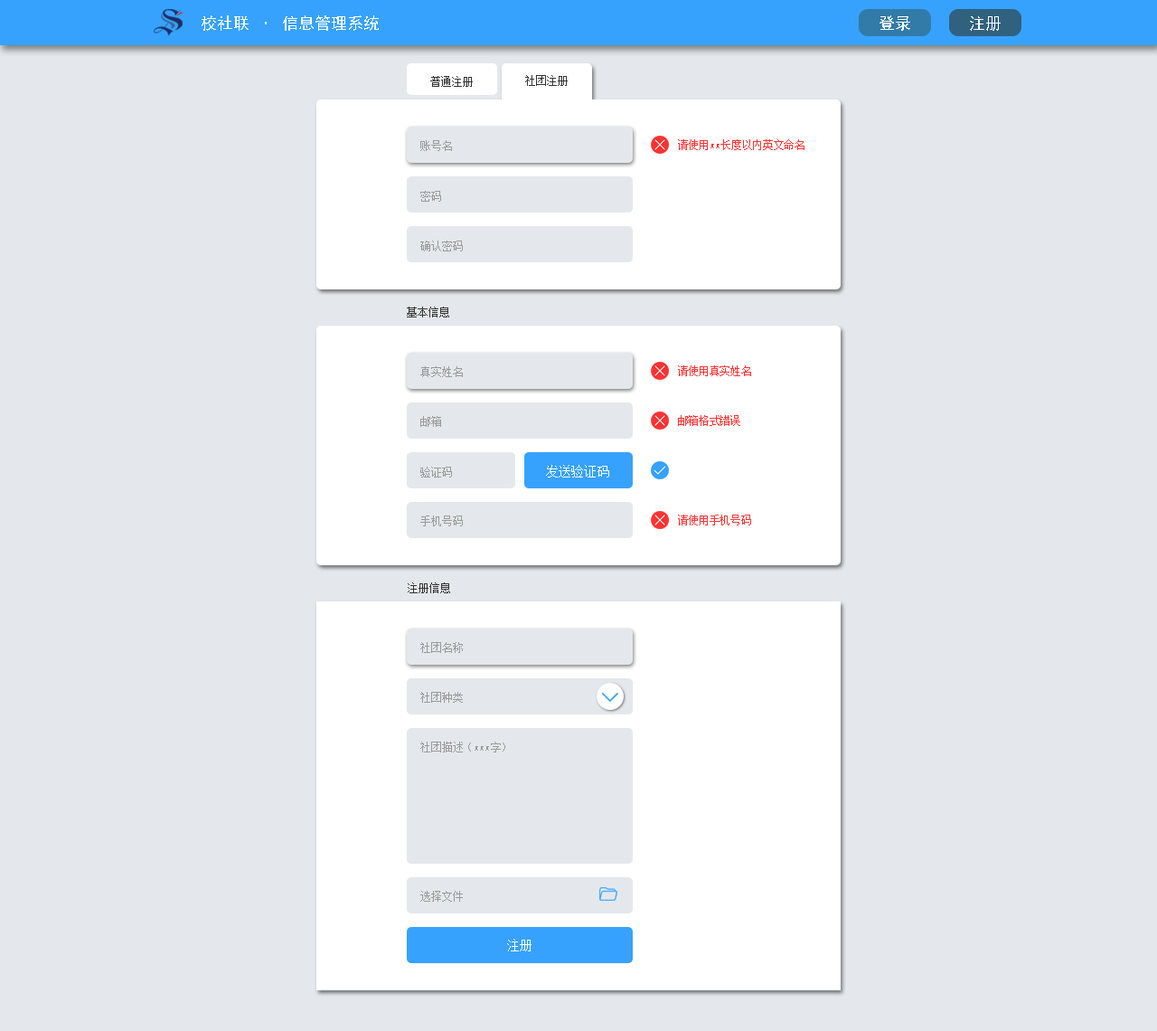
<style>
.page{position:relative;width:1157px;height:1031px;background:#e4e8ec}
.page>*{position:absolute;margin:0}
.t1{font:16.3px "SimHei";color:#ffffff}
.t2{font:10.8px "SimSun";color:#333333}
.t3{font:10.8px "SimSun";color:#999999}
.t4{font:10.8px "SimSun";color:#ff3333}
.t5{font:12.7px "SimSun";color:#ffffff}
</style>
<div class="page">
<p class="t1" style="left:202px;top:15px;width:177px;height:16px">校社联 · 信息管理系统</p>
<p class="t1" style="left:880px;top:15px;width:30px;height:16px">登录</p>
<p class="t1" style="left:970px;top:16px;width:31px;height:15px">注册</p>
<p class="t2" style="left:430px;top:76px;width:43px;height:11px">普通注册</p>
<p class="t2" style="left:525px;top:75px;width:43px;height:11px">社团注册</p>
<p class="t3" style="left:420px;top:140px;width:32px;height:11px">账号名</p>
<p class="t4" style="left:678px;top:139px;width:127px;height:11px">请使用xx长度以内英文命名</p>
<p class="t3" style="left:420px;top:191px;width:21px;height:11px">密码</p>
<p class="t3" style="left:420px;top:240px;width:43px;height:11px">确认密码</p>
<p class="t2" style="left:407px;top:306px;width:42px;height:11px">基本信息</p>
<p class="t4" style="left:678px;top:365px;width:73px;height:11px">请使用真实姓名</p>
<p class="t3" style="left:420px;top:366px;width:43px;height:11px">真实姓名</p>
<p class="t3" style="left:420px;top:416px;width:21px;height:11px">邮箱</p>
<p class="t4" style="left:678px;top:415px;width:62px;height:11px">邮箱格式错误</p>
<p class="t3" style="left:420px;top:466px;width:32px;height:11px">验证码</p>
<p class="t5" style="left:546px;top:465px;width:63px;height:12px">发送验证码</p>
<p class="t3" style="left:420px;top:515px;width:43px;height:11px">手机号码</p>
<p class="t4" style="left:678px;top:514px;width:73px;height:11px">请使用手机号码</p>
<p class="t2" style="left:408px;top:582px;width:42px;height:11px">注册信息</p>
<p class="t3" style="left:420px;top:642px;width:43px;height:11px">社团名称</p>
<p class="t3" style="left:420px;top:692px;width:43px;height:10px">社团种类</p>
<p class="t3" style="left:420px;top:741px;width:85px;height:11px">社团描述（xxx字）</p>
<p class="t3" style="left:420px;top:890px;width:43px;height:11px">选择文件</p>
<p class="t5" style="left:507px;top:938px;width:25px;height:13px">注册</p>
</div>
